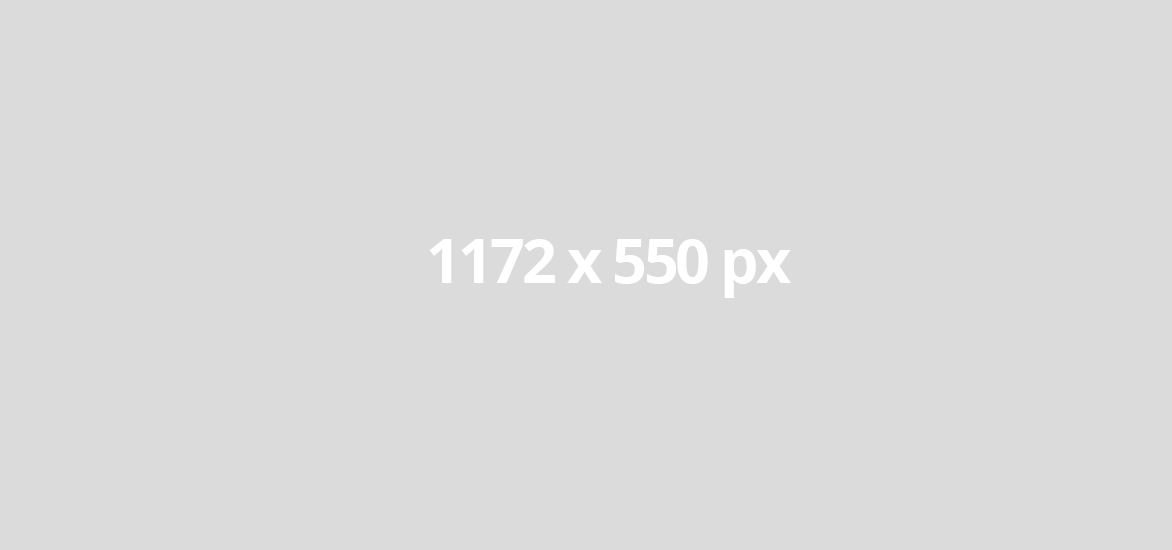
<style>
.page{position:relative;width:1172px;height:550px;background:#dbdbdb}
.page>*{position:absolute;margin:0}
.t1{font:61.2px "OpenSans-Bold";letter-spacing:-0.05em;color:#ffffff}
</style>
<div class="page">
<p class="t1" style="left:429px;top:239px;width:362px;height:59px">1172 x 550 px</p>
</div>
